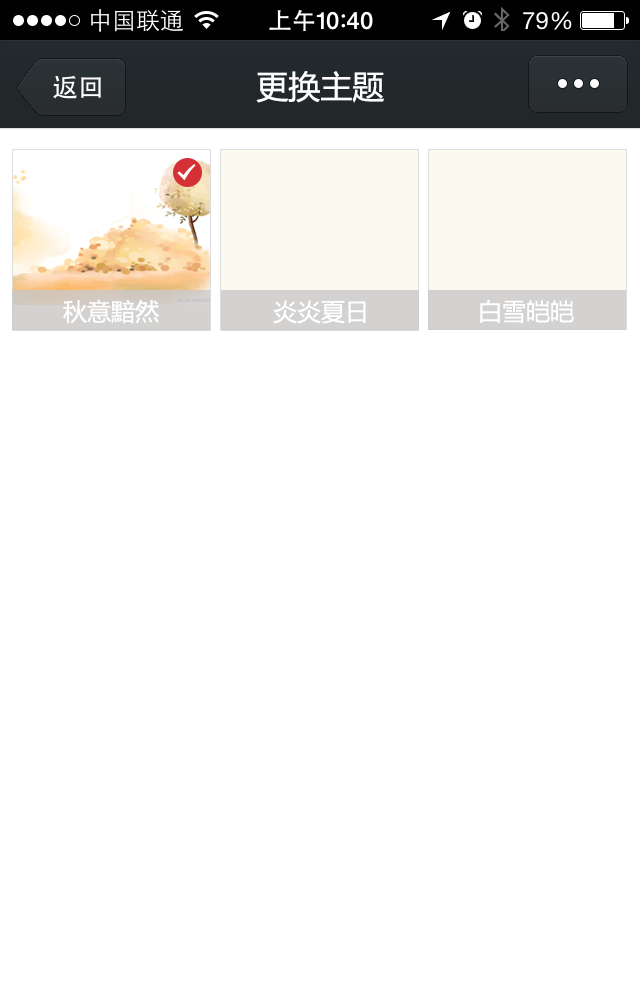
<style>
.page{position:relative;width:640px;height:1000px;background:#ffffff}
.page>*{position:absolute;margin:0}
.t1{font:32px "MicrosoftYaHei";color:#ffffff}
.t2{font:24px "MicrosoftYaHei";color:#ffffff}
</style>
<div class="page">
<p class="t1" style="left:256px;top:71px;width:128px;height:32px">更换主题</p>
<p class="t2" style="left:63px;top:299px;width:96px;height:25px">秋意黯然</p>
<p class="t2" style="left:273px;top:300px;width:93px;height:24px">炎炎夏日</p>
<p class="t2" style="left:480px;top:299px;width:94px;height:25px">白雪皑皑</p>
</div>
